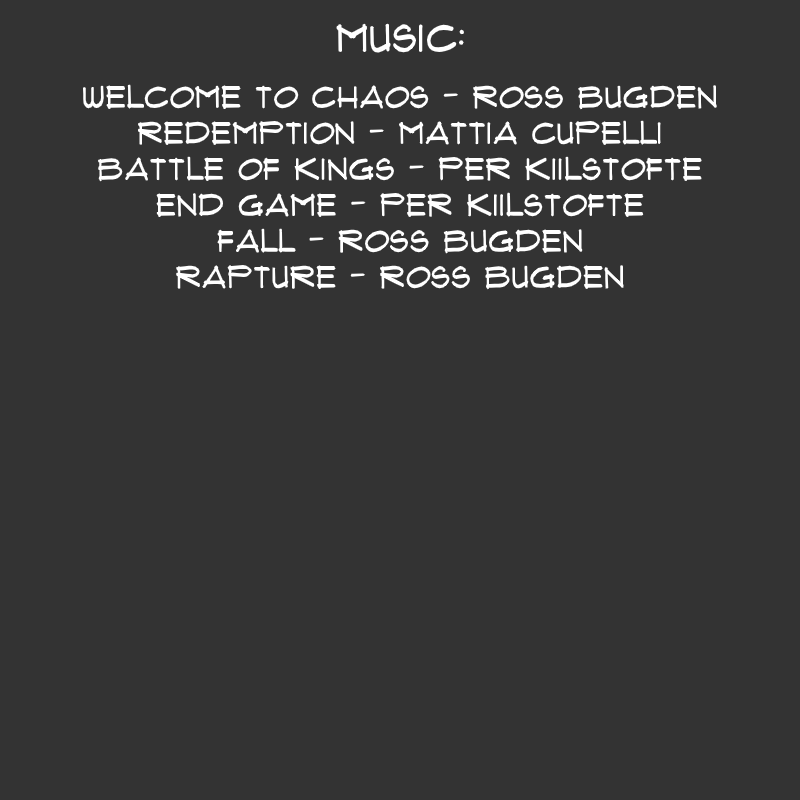
<style>
.page{position:relative;width:800px;height:800px;background:#333333}
.page>*{position:absolute;margin:0}
.t1{font:38px "Flux-Architect";color:#ffffff}
.t2{font:30px "Flux-Architect";color:#ffffff}
</style>
<div class="page">
<p class="t1" style="left:336px;top:23px;width:129px;height:30px">music:</p>
<p class="t2" style="left:83px;top:84px;width:634px;height:206px;text-align:center">welcome to chaos - ross bugden<br>redemption - mattia cupelli<br>battle of kings - per kiilstofte<br>end game - per kiilstofte<br>fall - ross bugden<br>rapture - Ross Bugden</p>
</div>
